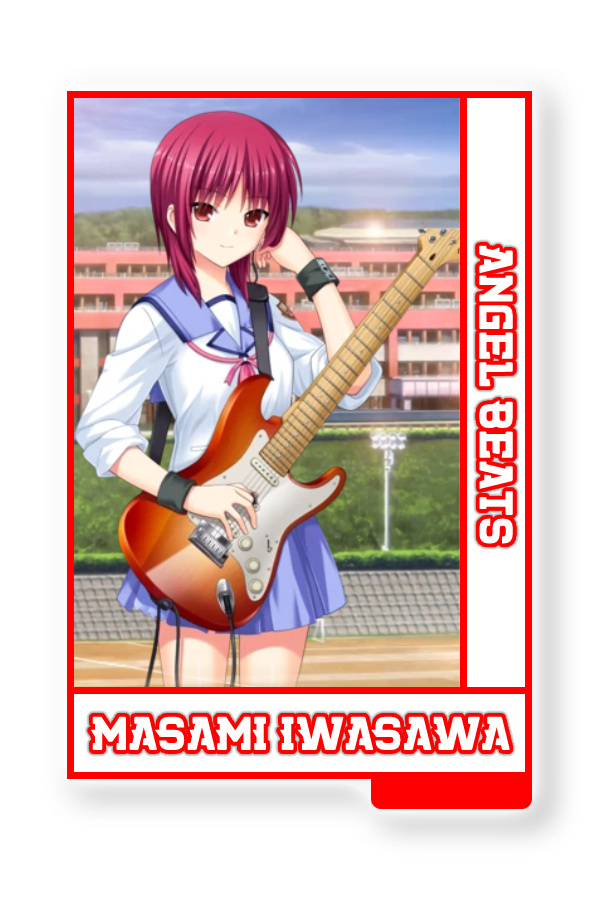
<style>
.page{position:relative;width:600px;height:900px;background:#ffffff}
.page>*{position:absolute;margin:0}
.t1{font:48.8px "KillerCollege";color:#ffffff}
.t2{font:48.6px "KillerCollege";color:#ffffff}
</style>
<div class="page">
<p class="t1" style="left:479px;top:245px;width:34px;height:299px;rotate:90deg">Angel Beats</p>
<p class="t2" style="left:90px;top:716px;width:420px;height:35px">MASAMI IWASAWA</p>
</div>
